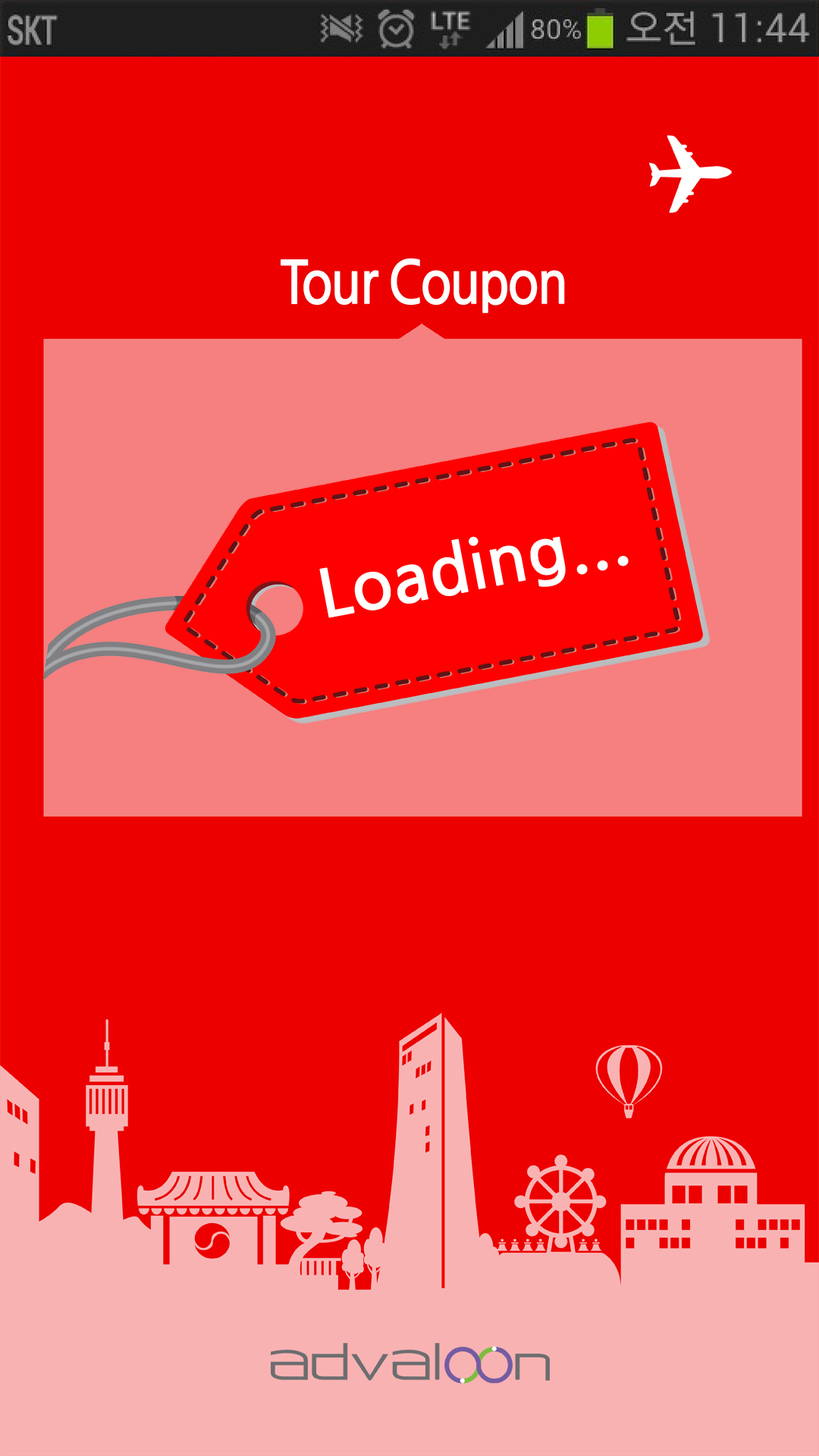
<style>
.page{position:relative;width:819px;height:1456px;background:#ec0000}
.page>*{position:absolute;margin:0}
.t1{font:59.4px "NanumGothicBold";letter-spacing:-0.05em;color:#ffffff;scale:0.88 1}
.t2{font:66.1px "NanumGothicBold";color:#ffffff;scale:1.04 1}
</style>
<div class="page">
<p class="t1" style="left:281px;top:258px;width:284px;height:55px">Tour Coupon</p>
<p class="t2" style="left:319px;top:536px;width:310px;height:82px;rotate:-11deg">Loading...</p>
</div>
